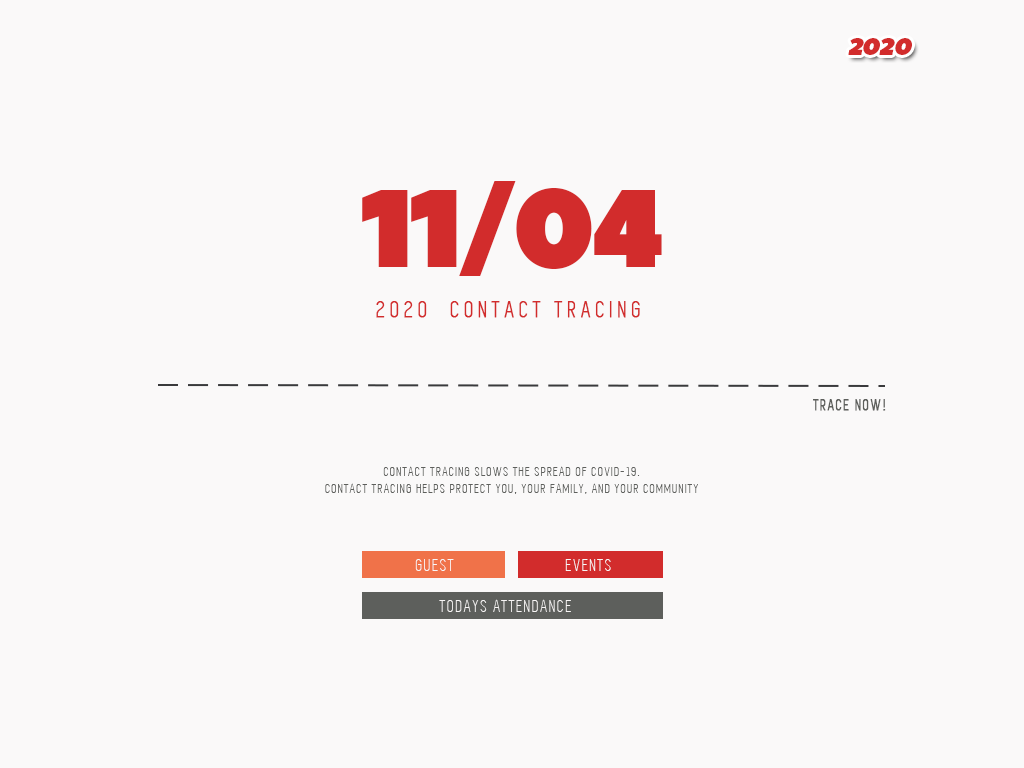
<style>
.page{position:relative;width:1024px;height:768px;background:#faf9f9}
.page>*{position:absolute;margin:0}
.t1{font:24px "PeaceSans";letter-spacing:-0.05em;color:#d22c2c;text-transform:uppercase;font-style:italic}
.t2{font:109.7px "PeaceSans";letter-spacing:-0.05em;color:#d22c2c;text-transform:uppercase}
.t3{font:24px "Simplifica";letter-spacing:0.2em;color:#d22c2c;text-transform:uppercase;font-weight:bold}
.t4{font:16px "Simplifica";letter-spacing:0.1em;color:#5d5f5c;text-transform:uppercase;font-weight:bold}
.t5{font:14px "Simplifica";letter-spacing:0.1em;color:#5d5f5c;text-transform:uppercase}
.t6{font:18px "Simplifica";letter-spacing:0.1em;color:#f8f6f6;text-transform:uppercase}
</style>
<div class="page">
<p class="t1" style="left:848px;top:38px;width:64px;height:17px">2020</p>
<p class="t2" style="left:362px;top:181px;width:300px;height:95px">11/04</p>
<p class="t3" style="left:376px;top:301px;width:264px;height:17px">2020  contact tracing</p>
<p class="t4" style="left:813px;top:399px;width:73px;height:12px">trace now!</p>
<p class="t5" style="left:325px;top:466px;width:373px;height:28px;text-align:center">Contact tracing slows the spread of COVID-19. <br>Contact tracing helps protect you, your family, and your community</p>
<p class="t6" style="left:415px;top:559px;width:39px;height:12px">guest</p>
<p class="t6" style="left:565px;top:559px;width:46px;height:12px">events</p>
<p class="t6" style="left:439px;top:599px;width:132px;height:13px">todays attendance</p>
</div>
